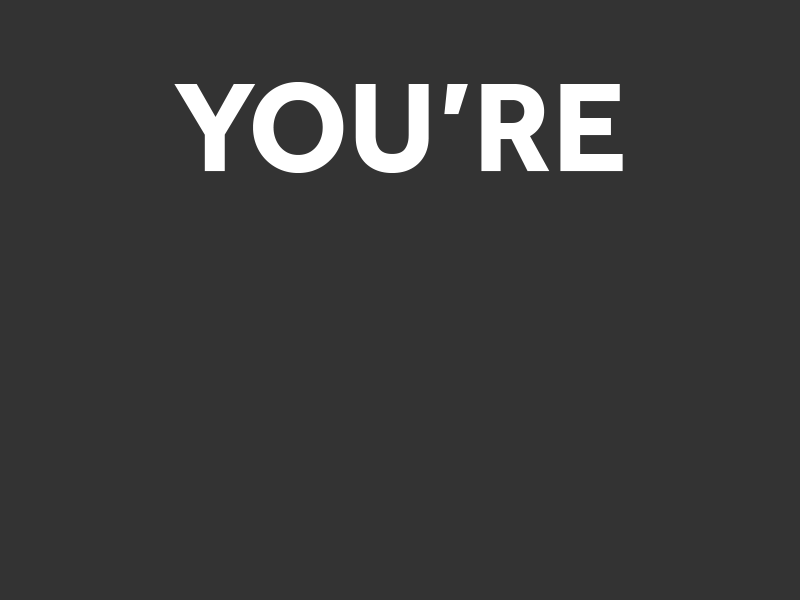
<style>
.page{position:relative;width:800px;height:600px;background:#333333}
.page>*{position:absolute;margin:0}
.t1{font:129.7px "Effra-Bold";color:#ffffff}
</style>
<div class="page">
<p class="t1" style="left:174px;top:82px;width:449px;height:91px">YOU’RE</p>
</div>
